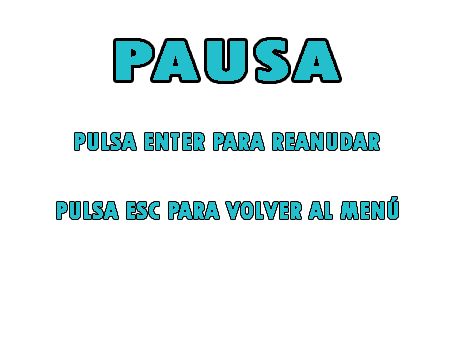
<style>
.page{position:relative;width:454px;height:340px;background:#ffffff}
.page>*{position:absolute;margin:0}
.t1{font:57.6px "TwCenMT-CondensedExtraBold";color:#23bfcd;font-weight:bold;scale:1.43 1}
.t2{font:24px "TwCenMT-CondensedExtraBold";color:#23bfcd;font-weight:bold}
</style>
<div class="page">
<p class="t1" style="left:116px;top:40px;width:223px;height:41px">PAUSA</p>
<p class="t2" style="left:75px;top:133px;width:304px;height:17px">PULSA ENTER PARA REANUDAR</p>
<p class="t2" style="left:57px;top:197px;width:341px;height:22px">PULSA ESC PARA VOLVER AL MENÚ</p>
</div>
